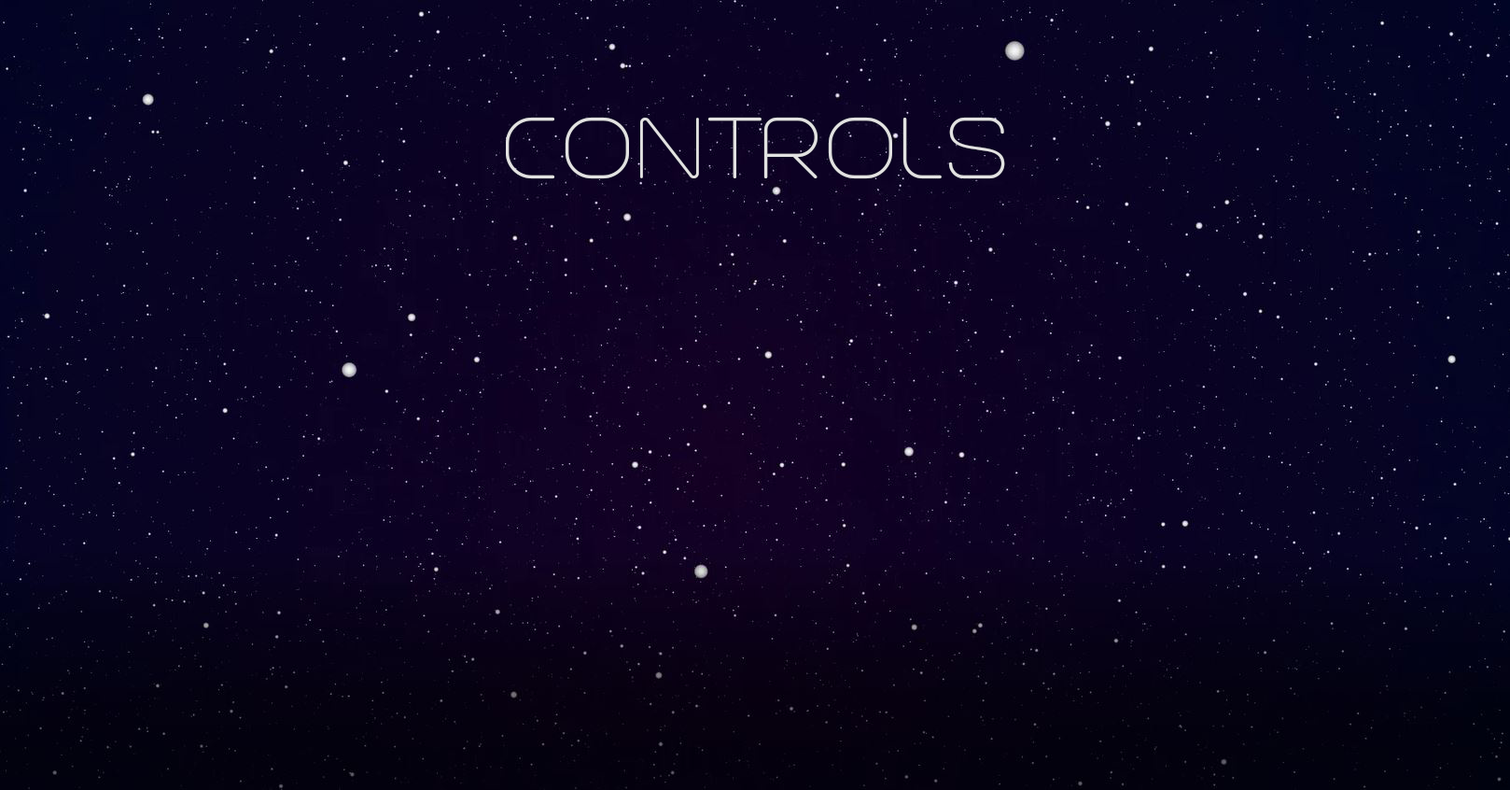
<style>
.page{position:relative;width:1510px;height:790px}
.page>*{position:absolute;margin:0}
.t1{font:108.9px "Trench-Thin";color:#e2e2e2}
</style>
<div class="page">
<p class="t1" style="left:506px;top:117px;width:499px;height:62px">CONTROLS</p>
</div>
